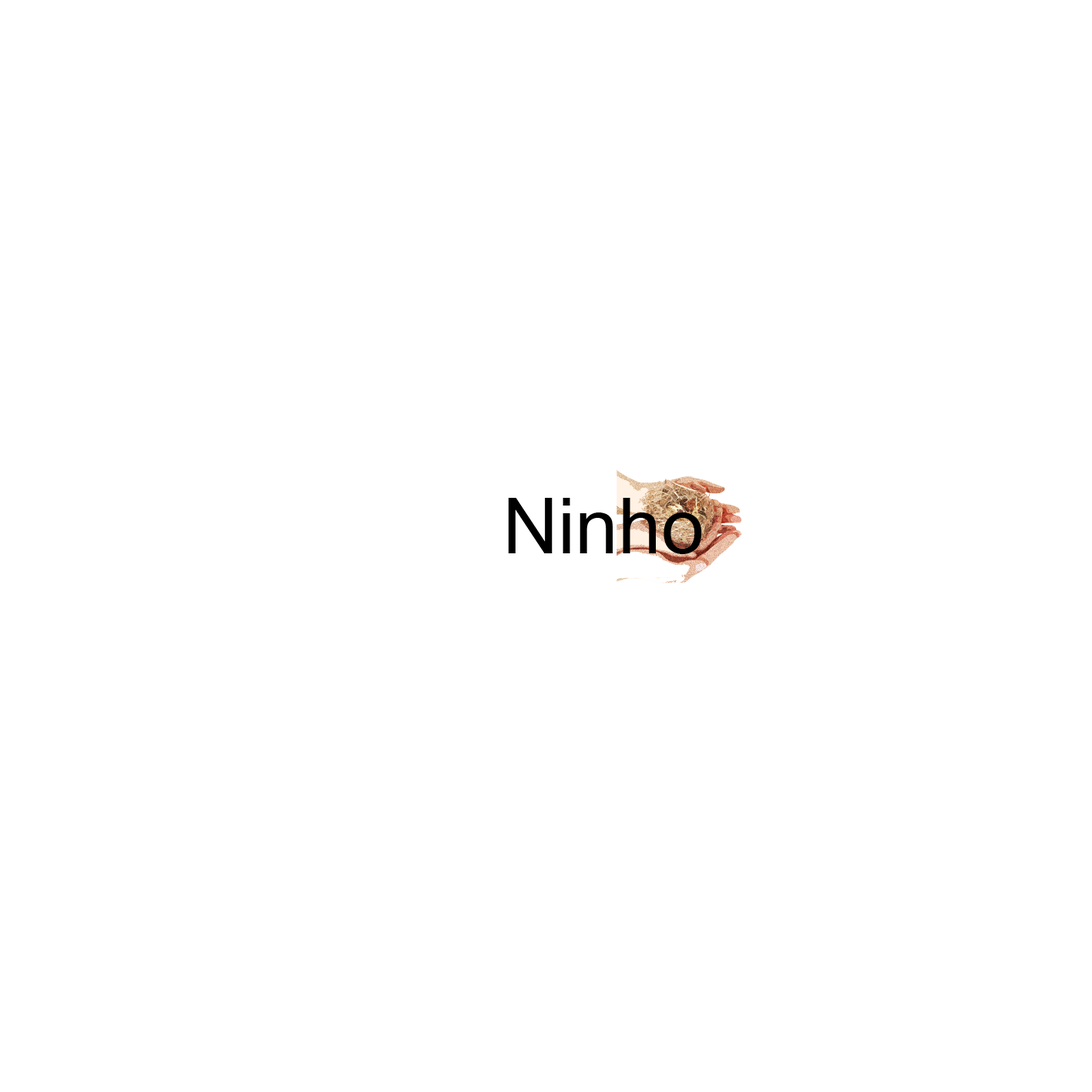
<style>
.page{position:relative;width:1092px;height:1092px;background:#ffffff}
.page>*{position:absolute;margin:0}
.t1{font:77.1px "ArialUnicodeMS";color:#000000}
</style>
<div class="page">
<p class="t1" style="left:508px;top:498px;width:194px;height:56px">Ninho</p>
</div>
